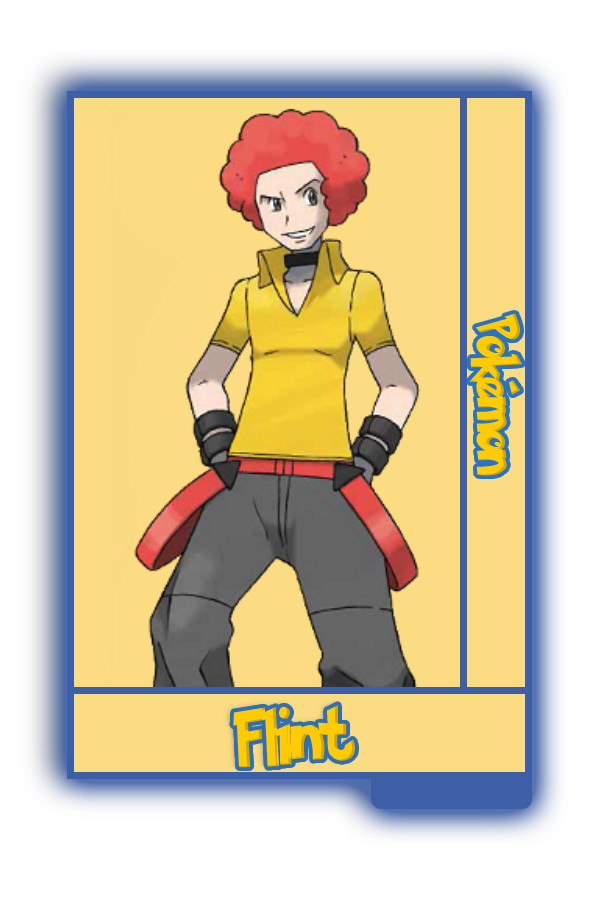
<style>
.page{position:relative;width:600px;height:900px;background:#fbdc83}
.page>*{position:absolute;margin:0}
.t1{font:48.8px "PokemonSolidNormal";color:#ffcb05;scale:0.8 1}
.t2{font:56.6px "PokemonSolidNormal";color:#ffcb05;scale:0.92 1}
</style>
<div class="page">
<p class="t1" style="left:469px;top:313px;width:54px;height:163px;rotate:90deg">Pokémon</p>
<p class="t2" style="left:233px;top:705px;width:123px;height:63px">Flint</p>
</div>
